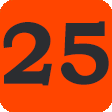
<style>
.page{position:relative;width:112px;height:112px;background:#ff4500}
.page>*{position:absolute;margin:0}
.t1{font:89px "BookmanOldStyle-Bold";color:#2b2d31;scale:0.95 1}
</style>
<div class="page">
<p class="t1" style="left:3px;top:21px;width:106px;height:65px">25</p>
</div>
